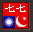
<style>
.page{position:relative;width:33px;height:32px;background:#f20000}
.page>*{position:absolute;margin:0}
.t1{font:10.4px "SimSun";color:#ffffff}
</style>
<div class="page">
<p class="t1" style="left:5px;top:4px;width:21px;height:8px">七七</p>
</div>
